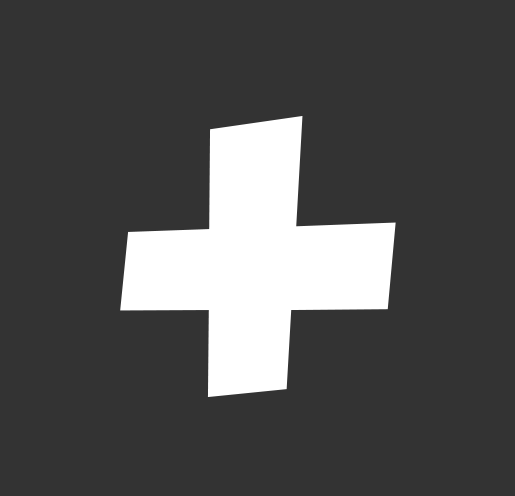
<style>
.page{position:relative;width:515px;height:496px;background:#333333}
.page>*{position:absolute;margin:0}
.t1{font:416px "GROBOLD";color:#ffffff}
</style>
<div class="page">
<p class="t1" style="left:120px;top:116px;width:276px;height:281px">+</p>
</div>
